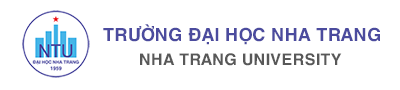
<style>
.page{position:relative;width:400px;height:90px;background:#ffffff}
.page>*{position:absolute;margin:0}
.t1{font:18px "UTMHelveBold";color:#4b4b9e}
.t2{font:16px "UTMHelveBold";color:#585858}
</style>
<div class="page">
<p class="t1" style="left:103px;top:24px;width:277px;height:21px">TRƯỜNG ĐẠI HỌC NHA TRANG</p>
<p class="t2" style="left:140px;top:53px;width:202px;height:13px">NHA TRANG UNIVERSITY</p>
</div>
